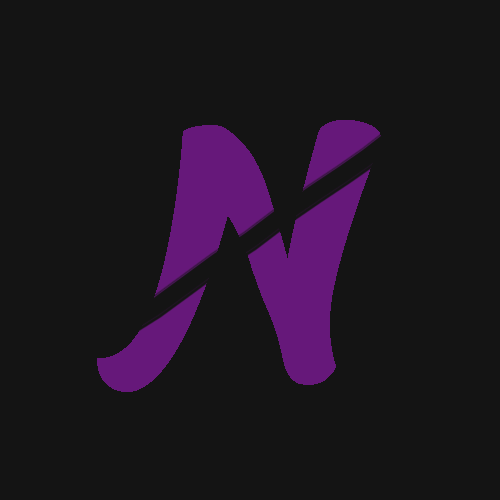
<style>
.page{position:relative;width:500px;height:500px;background:#141414}
.page>*{position:absolute;margin:0}
.t1{font:366.7px "Billyer";color:#66187a;text-transform:uppercase}
</style>
<div class="page">
<p class="t1" style="left:97px;top:120px;width:284px;height:272px">N</p>
</div>
